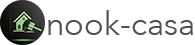
<style>
.page{position:relative;width:195px;height:45px;background:#ffffff}
.page>*{position:absolute;margin:0}
.t1{font:33.3px "Avenir-Light";color:#505050}
</style>
<div class="page">
<p class="t1" style="left:48px;top:10px;width:145px;height:25px">nook-casa</p>
</div>
